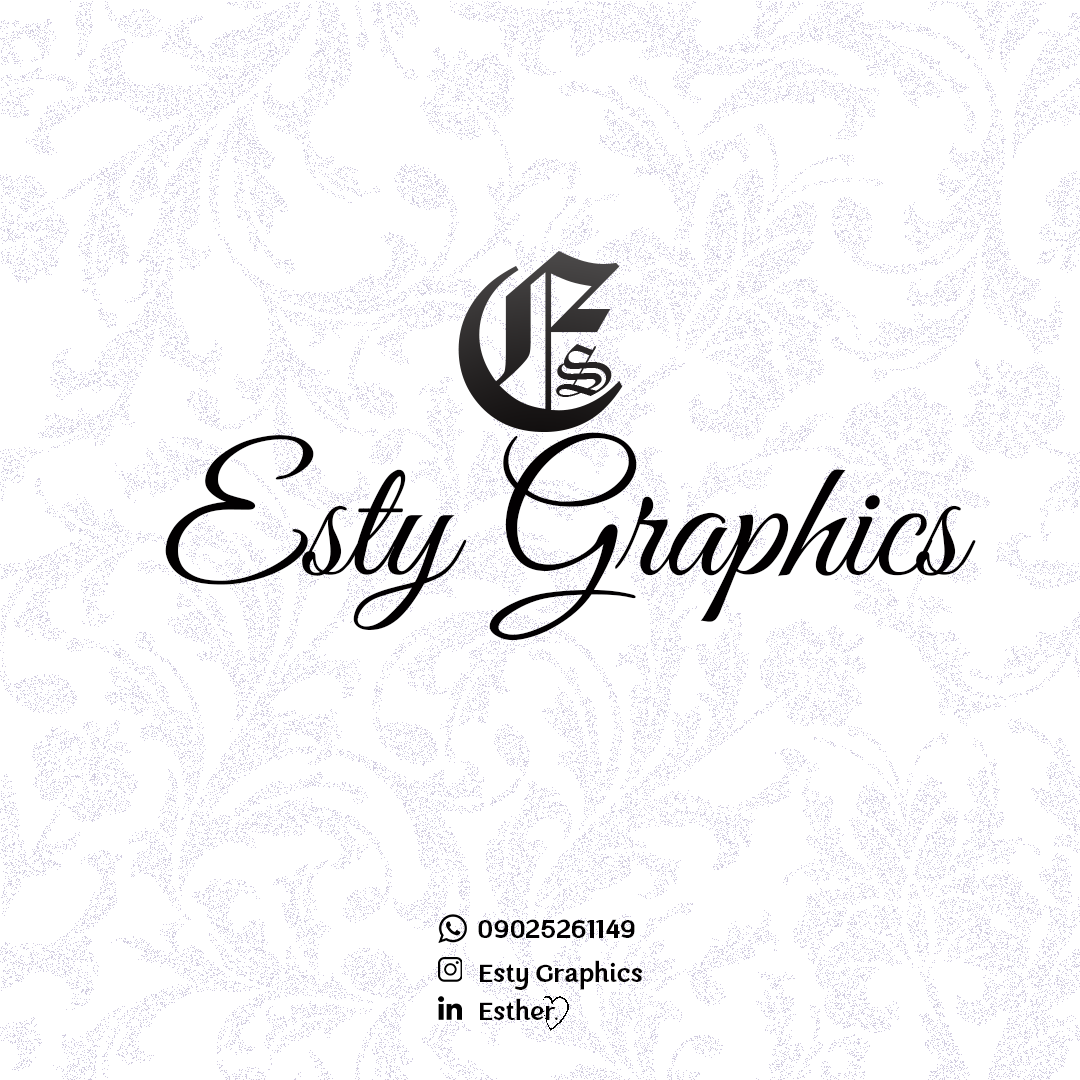
<style>
.page{position:relative;width:1080px;height:1080px;background:#ffffff}
.page>*{position:absolute;margin:0}
.t1{font:248.5px "OldEnglishTextMT"}
.t2{font:69.8px "OldEnglishTextMT";color:#232121}
.t3{font:174.3px "GreatVibes-Regular";color:#020001}
.t4{font:25.8px "CampaignSansSerifRegular";color:#020001}
.t5{font:25px "CampaignSansSerifRegular";color:#020001}
</style>
<div class="page">
<p class="t1" style="left:458px;top:251px;width:165px;height:181px">E</p>
<p class="t2" style="left:556px;top:344px;width:56px;height:53px">S</p>
<p class="t3" style="left:165px;top:432px;width:811px;height:209px">Esty Graphics</p>
<p class="t4" style="left:478px;top:919px;width:157px;height:19px">09025261149</p>
<p class="t5" style="left:480px;top:960px;width:162px;height:30px">Esty Graphics</p>
<p class="t5" style="left:480px;top:998px;width:78px;height:22px">Esther.</p>
</div>
